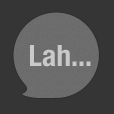
<style>
.page{position:relative;width:114px;height:114px;background:#353535}
.page>*{position:absolute;margin:0}
.t1{font:29.3px "HelveticaNeue-CondensedBold";color:#c9c9c9}
</style>
<div class="page">
<p class="t1" style="left:30px;top:45px;width:61px;height:22px">Lah...</p>
</div>
